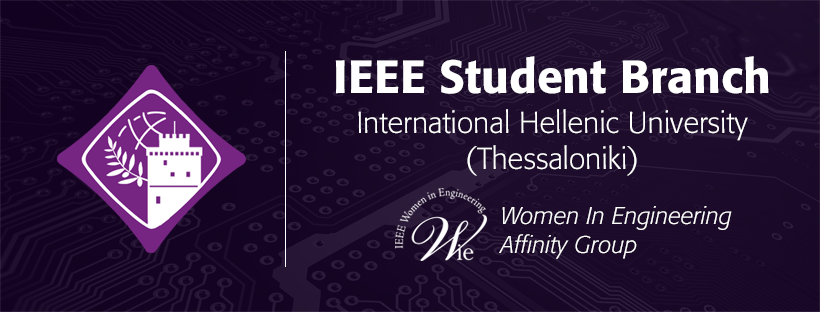
<style>
.page{position:relative;width:820px;height:312px}
.page>*{position:absolute;margin:0}
.t1{font:46px "Formata-Medium";color:#ffffff}
.t2{font:30px "Formata-Light";color:#ffffff}
.t3{font:24px "Formata-LightItalic";color:#ffffff}
</style>
<div class="page">
<p class="t1" style="left:335px;top:56px;width:434px;height:38px">IEEE Student Branch</p>
<p class="t2" style="left:358px;top:109px;width:390px;height:67px;text-align:center">International Hellenic University (Thessaloniki)</p>
<p class="t3" style="left:499px;top:206px;width:233px;height:53px">Women In Engineering<br>Affinity Group</p>
</div>
